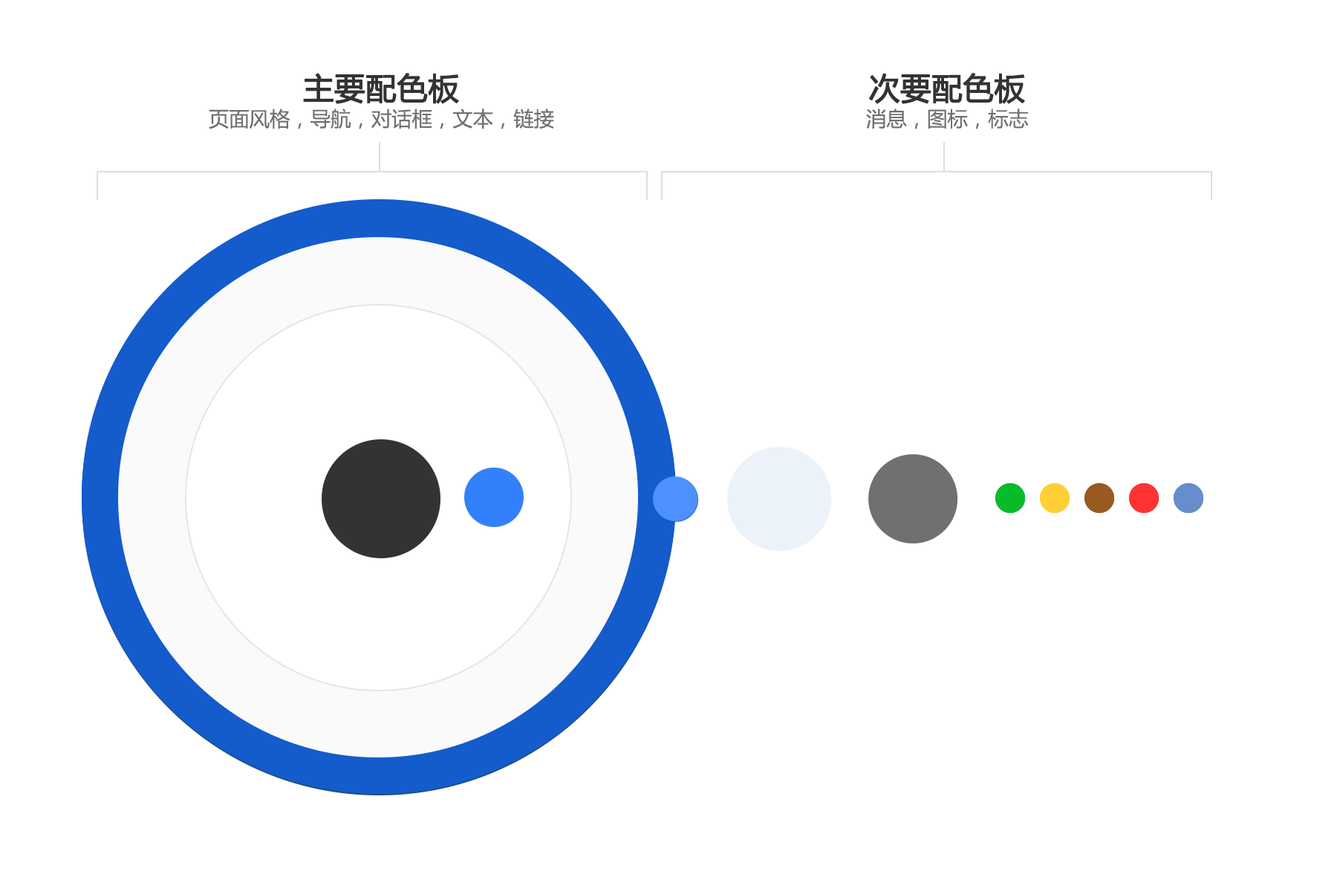
<style>
.page{position:relative;width:1337px;height:892px;background:#ffffff}
.page>*{position:absolute;margin:0}
.t1{font:20.4px/26.7px "MicrosoftYaHei";color:#707070}
.t2{font:30.6px/26.7px "MicrosoftYaHei";color:#333333;font-weight:bold}
</style>
<div class="page">
<p class="t1" style="left:209px;top:73px;width:345px;height:56px;text-align:center"><span class="t2">主要配色板<br></span>页面风格，导航，对话框，文本，链接</p>
<p class="t1" style="left:866px;top:73px;width:163px;height:56px;text-align:center"><span class="t2">次要配色板<br></span>消息，图标，标志</p>
</div>
